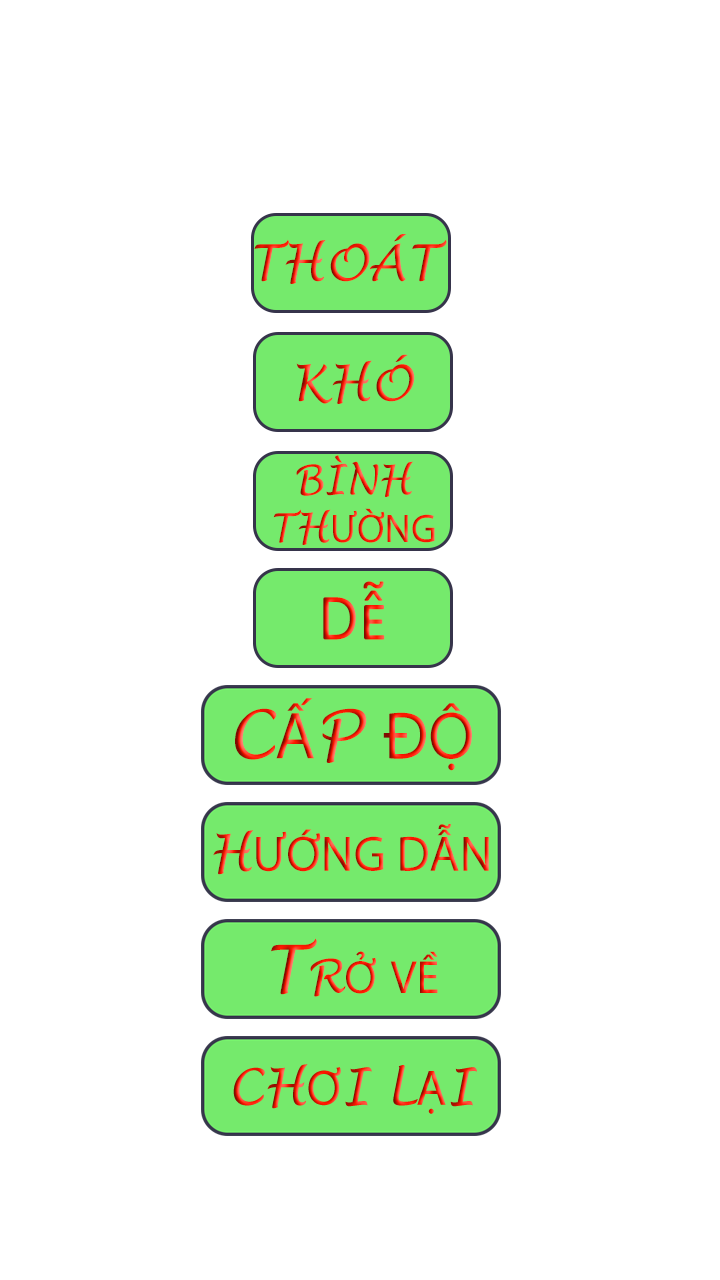
<style>
.page{position:relative;width:720px;height:1280px;background:#ffffff}
.page>*{position:absolute;margin:0}
.t1{font:50px "LucidaHandwriting-Italic";font-variant:small-caps}
.t2{font:70px "LucidaHandwriting-Italic";font-variant:small-caps}
.t3{font:40px/48px "LucidaHandwriting-Italic";font-variant:small-caps}
.t4{font:40px/48px "MyriadPro-Regular";font-variant:small-caps}
.t5{font:66.7px "Calibri";font-variant:small-caps}
.t6{font:66.7px "MyriadPro-Regular";font-variant:small-caps}
.t7{font:66.7px "LucidaHandwriting-Italic";font-variant:small-caps}
.t8{font:50px "MyriadPro-Regular";font-variant:small-caps}
</style>
<div class="page">
<p class="t1" style="left:254px;top:234px;width:193px;height:50px">THOÁT</p>
<p class="t2" style="left:296px;top:354px;width:119px;height:50px">khó</p>
<p class="t3" style="left:273px;top:455px;width:162px;height:90px;text-align:center">BÌNH<br>TH<span class="t4">ƯỜNG</span></p>
<p class="t5" style="left:323px;top:581px;width:62px;height:59px">Dễ</p>
<p class="t6" style="left:235px;top:698px;width:237px;height:73px"><span class="t7">C</span>Ấ<span class="t7">P </span>ĐỘ</p>
<p class="t8" style="left:213px;top:824px;width:276px;height:51px"><span class="t1">H</span>ƯỚNG DẪN</p>
<p class="t6" style="left:271px;top:938px;width:167px;height:59px"><span class="t7">Tr</span>ở về</p>
</div>
